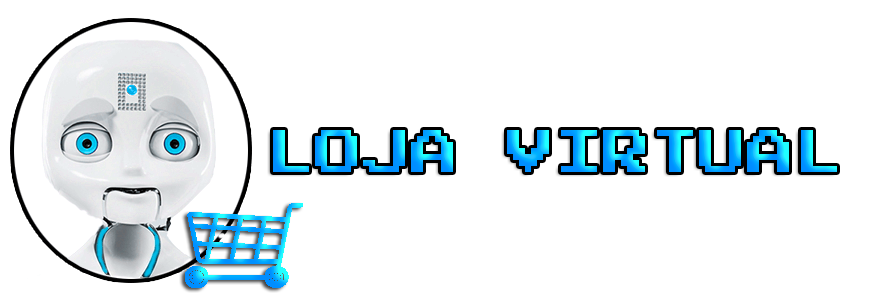
<style>
.page{position:relative;width:881px;height:300px;background:#ffffff}
.page>*{position:absolute;margin:0}
.t1{font:48px "PressStart2P"}
</style>
<div class="page">
<p class="t1" style="left:273px;top:130px;width:564px;height:42px">LOJA VIRTUAL</p>
</div>
